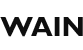
<style>
.page{position:relative;width:83px;height:50px;background:#ffffff}
.page>*{position:absolute;margin:0}
.t1{font:27.8px "GillSansMT-Bold";color:#0e0e0e}
</style>
<div class="page">
<p class="t1" style="left:0px;top:17px;width:83px;height:20px">WAIN</p>
</div>
